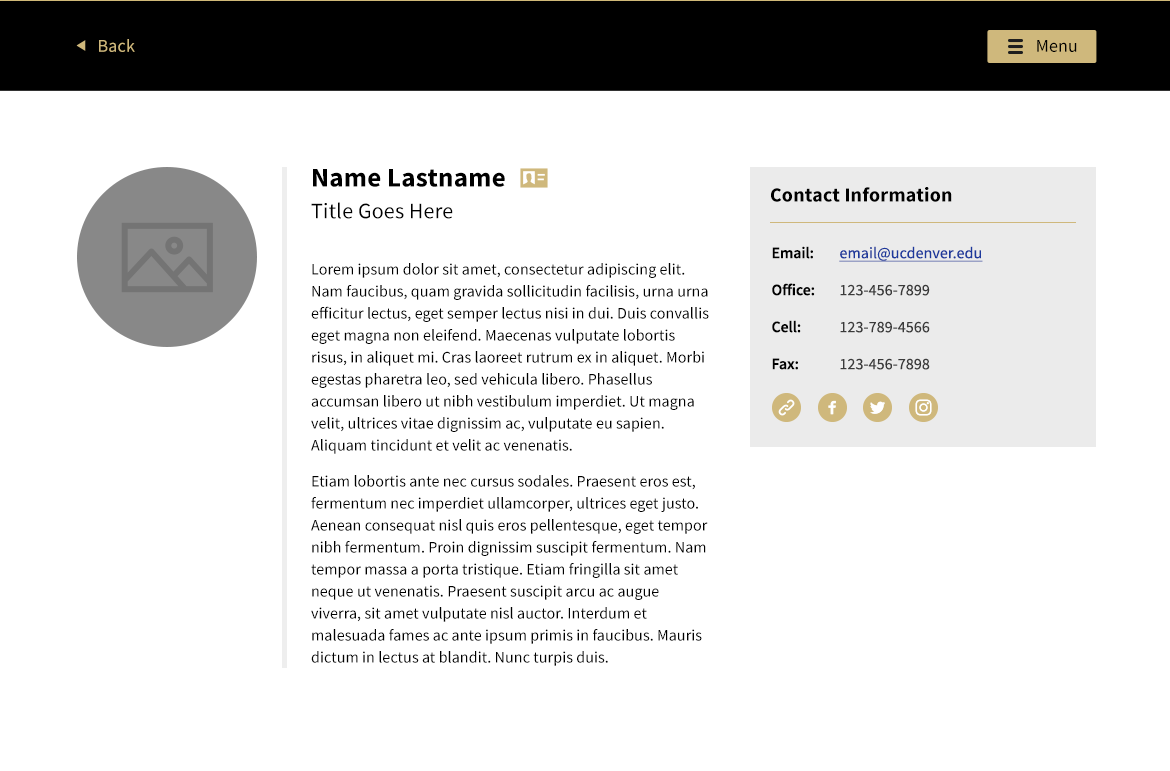
<style>
.page{position:relative;width:1170px;height:771px;background:#ffffff}
.page>*{position:absolute;margin:0}
.t1{font:18px "SourceSansPro-Regular";letter-spacing:0.01em;color:#cfb87c}
.t2{font:18px "SourceSansPro-Regular";letter-spacing:0.01em;color:#000000}
.t3{font:27px "SourceSansPro-Bold";letter-spacing:0.01em;color:#000000}
.t4{font:20px "SourceSansPro-Bold";letter-spacing:0.01em;color:#000000}
.t5{font:22px "SourceSansPro-Regular";letter-spacing:0.01em;color:#000000}
.t6{font:16px/25px "SourceSansPro-SemiBold";letter-spacing:-0.01em;color:#000000}
.t7{font:16px/25px "SourceSansPro-Regular";letter-spacing:0.005em;color:#3a3a3a}
.t8{font:16px/25px "SourceSansPro-Regular";letter-spacing:0.005em;color:#1d399c;text-decoration:underline}
.t9{font:16px/22px "SourceSansPro-Regular";letter-spacing:0.005em;color:#000000}
</style>
<div class="page">
<p class="t1" style="left:99px;top:39px;width:36px;height:13px">Back</p>
<p class="t2" style="left:1037px;top:40px;width:40px;height:12px">Menu</p>
<p class="t3" style="left:313px;top:169px;width:192px;height:18px">Name Lastname</p>
<p class="t4" style="left:771px;top:187px;width:181px;height:15px">Contact Information</p>
<p class="t5" style="left:311px;top:202px;width:142px;height:17px">Title Goes Here</p>
<p class="t6" style="left:772px;top:246px;width:43px;height:124px">Email:<br>Office:<br>Cell:<br>Fax:</p>
<p class="t7" style="left:839px;top:246px;width:144px;height:124px"><span class="t8">email@ucdenver.edu<br></span>123-456-7899<br>123-789-4566<br>123-456-7898</p>
<p class="t9" style="left:311px;top:263px;width:398px;height:403px">Lorem ipsum dolor sit amet, consectetur adipiscing elit. Nam faucibus, quam gravida sollicitudin facilisis, urna urna efficitur lectus, eget semper lectus nisi in dui. Duis convallis eget magna non eleifend. Maecenas vulputate lobortis risus, in aliquet mi. Cras laoreet rutrum ex in aliquet. Morbi egestas pharetra leo, sed vehicula libero. Phasellus accumsan libero ut nibh vestibulum imperdiet. Ut magna velit, ultrices vitae dignissim ac, vulputate eu sapien. Aliquam tincidunt et velit ac venenatis.<br>Etiam lobortis ante nec cursus sodales. Praesent eros est, fermentum nec imperdiet ullamcorper, ultrices eget justo. Aenean consequat nisl quis eros pellentesque, eget tempor nibh fermentum. Proin dignissim suscipit fermentum. Nam tempor massa a porta tristique. Etiam fringilla sit amet neque ut venenatis. Praesent suscipit arcu ac augue viverra, sit amet vulputate nisl auctor. Interdum et malesuada fames ac ante ipsum primis in faucibus. Mauris dictum in lectus at blandit. Nunc turpis duis.</p>
</div>
